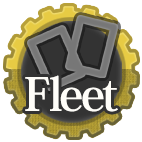
<style>
.page{position:relative;width:142px;height:142px;background:#ffffff}
.page>*{position:absolute;margin:0}
.t1{font:48px "HeiseiMinStd-W7";letter-spacing:-0.04em;color:#fffef9}
</style>
<div class="page">
<p class="t1" style="left:25px;top:75px;width:93px;height:37px">Fleet</p>
</div>
